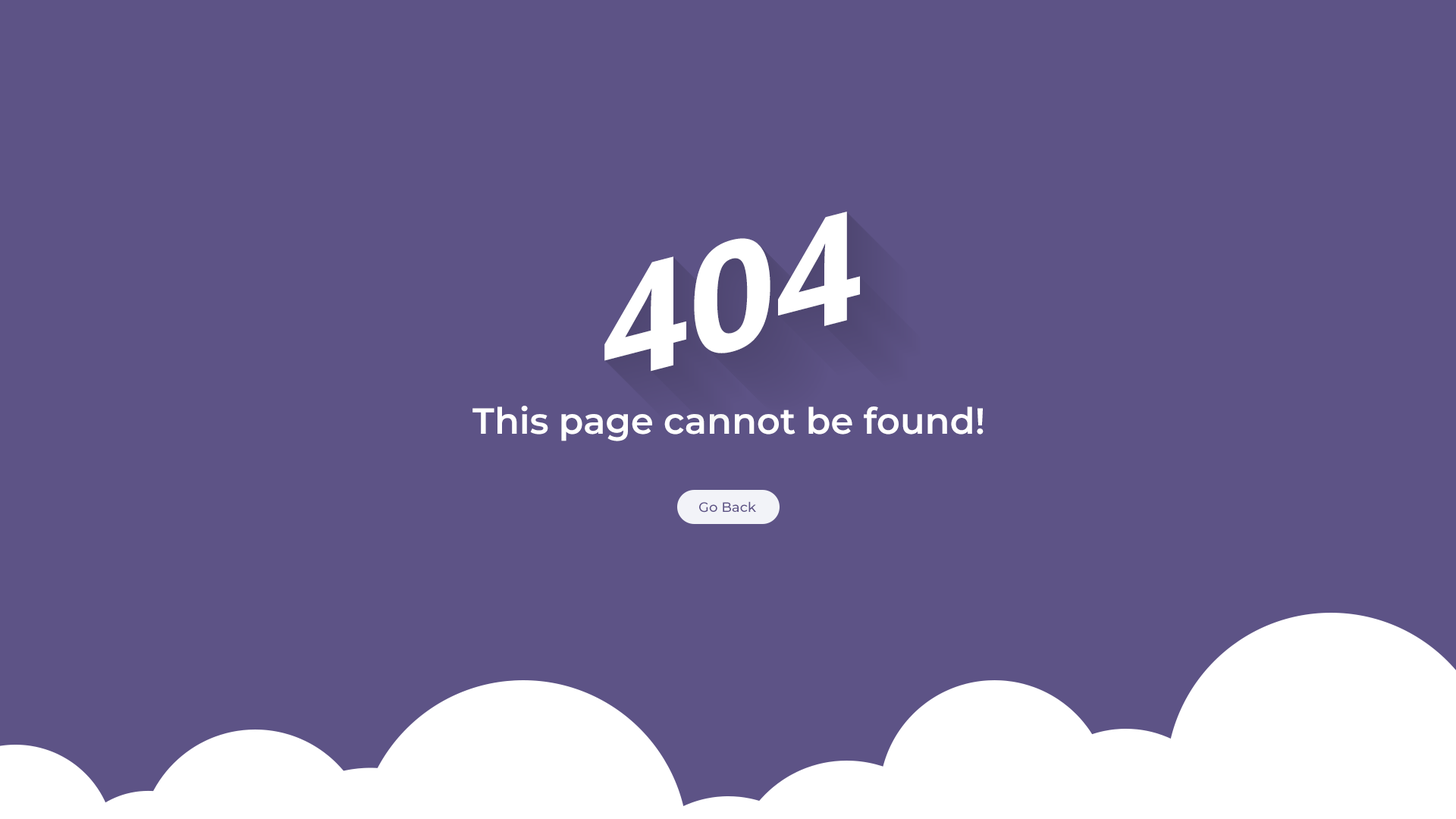
<style>
.page{position:relative;width:1456px;height:819px;background:#5d5386}
.page>*{position:absolute;margin:0}
.t1{font:151.7px "NotoSans-Bold";color:#ffffff;scale:1.03 1}
.t2{font:36.4px "Montserrat-SemiBold";color:#ffffff}
.t3{font:13.6px "Montserrat-Medium";color:#5d5386}
</style>
<div class="page">
<p class="t1" style="left:604px;top:212px;width:256px;height:160px;rotate:-15deg">404</p>
<p class="t2" style="left:472px;top:406px;width:512px;height:35px">This page cannot be found!</p>
<p class="t3" style="left:699px;top:501px;width:57px;height:12px">Go Back</p>
</div>
